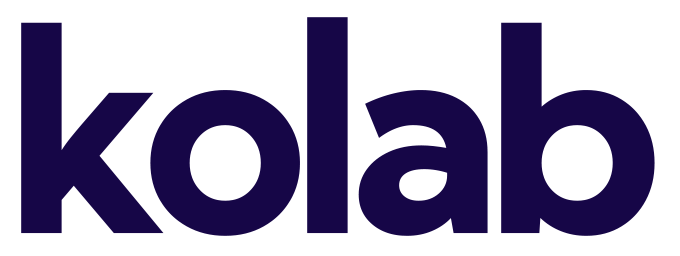
<style>
.page{position:relative;width:680px;height:256px;background:#ffffff}
.page>*{position:absolute;margin:0}
.t1{font:287.5px "KumbhSans-Bold";letter-spacing:-0.07em;color:#160647}
</style>
<div class="page">
<p class="t1" style="left:21px;top:17px;width:634px;height:219px">kolab</p>
</div>
